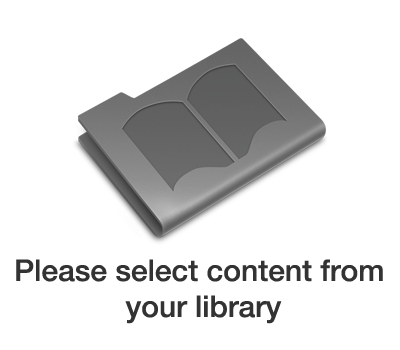
<style>
.page{position:relative;width:400px;height:350px;background:#ffffff}
.page>*{position:absolute;margin:0}
.t1{font:30px "HelveticaNeue-Medium";color:#333333}
</style>
<div class="page">
<p class="t1" style="left:16px;top:259px;width:367px;height:65px;text-align:center">Please select content from <br>your library</p>
</div>
